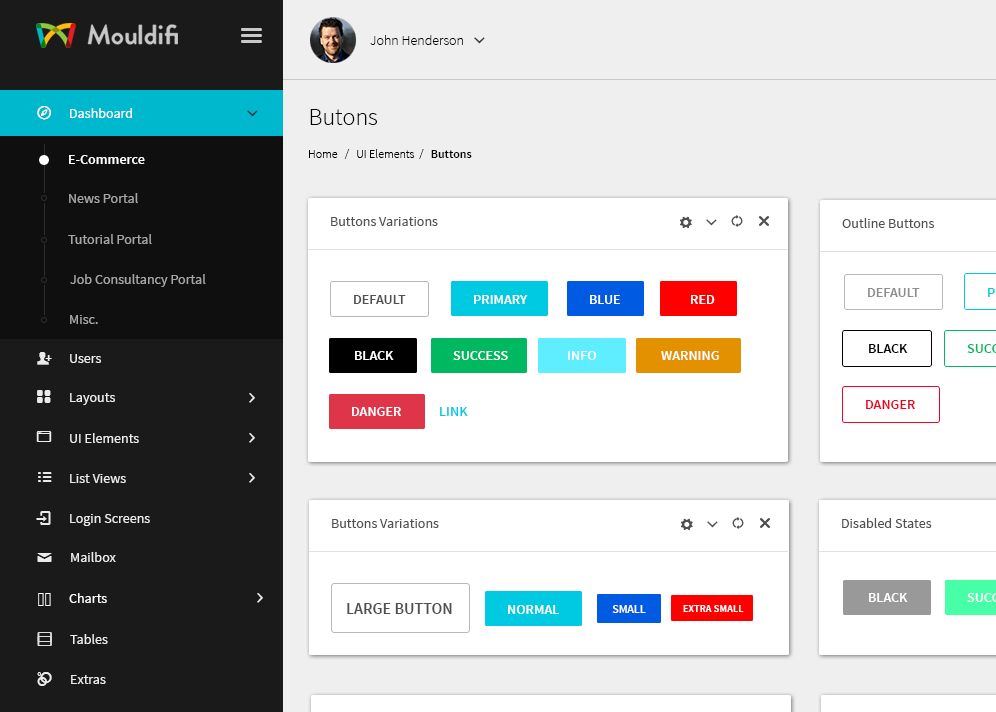
<style>
.page{position:relative;width:996px;height:712px;background:#ffffff}
.page>*{position:absolute;margin:0}
.t1{font:14px "SourceSansPro-Light";color:#000000}
.t2{font:14px "SourceSansPro-Regular";color:#ffffff}
.t3{font:14px "SourceSansPro-Regular";color:#ffffff;font-variant:small-caps}
.t4{font:24px "SourceSansPro-Light";color:#000000}
.t5{font:12px "SourceSansPro-Light";color:#000000}
.t6{font:12px "SourceSansPro-Semibold";color:#000000}
.t7{font:14px "SourceSansPro-Semibold";color:#ffffff}
.t8{font:14px "SourceSansPro-Regular";color:#a6a5a5}
.t9{font:14px "SourceSansPro-Regular";color:#505050}
.t10{font:13.7px "SourceSansPro-Regular";color:#a6a5a5}
.t11{font:14px "SourceSansPro-Semibold";color:#8e8e8e;text-transform:uppercase}
.t12{font:14px "SourceSansPro-Semibold";color:#505050;text-transform:uppercase}
.t13{font:14px "SourceSansPro-Semibold";color:#ffffff;text-transform:uppercase}
.t14{font:14px "SourceSansPro-Semibold";color:#000000;text-transform:uppercase}
.t15{font:14px "SourceSansPro-Regular";color:#ebebeb}
.t16{font:14px "SourceSansPro-Semibold";color:#ed041f;text-transform:uppercase}
.t17{font:14px "SourceSansPro-Semibold";color:#00cae2;text-transform:uppercase}
.t18{font:16px "SourceSansPro-Semibold";color:#505050;text-transform:uppercase}
.t19{font:11.6px "SourceSansPro-Semibold";color:#ffffff;text-transform:uppercase}
.t20{font:10.4px "SourceSansPro-Semibold";color:#ffffff;text-transform:uppercase}
.t21{font:13.7px "SourceSansPro-Regular";color:#ebebeb}
</style>
<div class="page">
<p class="t1" style="left:370px;top:35px;width:93px;height:10px">John Henderson</p>
<p class="t2" style="left:70px;top:108px;width:62px;height:10px"><span class="t3">D</span>ashboard</p>
<p class="t4" style="left:310px;top:109px;width:67px;height:16px">Butons</p>
<p class="t5" style="left:309px;top:149px;width:163px;height:10px">Home   /   UI Elements  /  <span class="t6"> Buttons</span></p>
<p class="t7" style="left:69px;top:155px;width:76px;height:9px">E-Commerce</p>
<p class="t8" style="left:69px;top:193px;width:69px;height:10px">News Portal</p>
<p class="t9" style="left:331px;top:217px;width:107px;height:9px">Buttons Variations</p>
<p class="t9" style="left:842px;top:218px;width:92px;height:10px">Outline Buttons</p>
<p class="t10" style="left:68px;top:234px;width:84px;height:10px">Tutorial Portal</p>
<p class="t10" style="left:70px;top:274px;width:136px;height:13px">Job Consultancy Portal</p>
<p class="t11" style="left:868px;top:288px;width:52px;height:9px">default</p>
<p class="t12" style="left:354px;top:295px;width:52px;height:9px">default</p>
<p class="t13" style="left:474px;top:295px;width:54px;height:9px">primary</p>
<p class="t13" style="left:590px;top:295px;width:30px;height:9px">blue</p>
<p class="t13" style="left:691px;top:295px;width:24px;height:9px">red</p>
<p class="t10" style="left:70px;top:315px;width:28px;height:9px">Misc.</p>
<p class="t13" style="left:355px;top:351px;width:39px;height:9px">black</p>
<p class="t13" style="left:453px;top:351px;width:55px;height:9px">SUCCESS</p>
<p class="t13" style="left:568px;top:351px;width:29px;height:9px">INFO</p>
<p class="t13" style="left:661px;top:351px;width:58px;height:9px">WARNING</p>
<p class="t14" style="left:869px;top:344px;width:39px;height:9px">black</p>
<p class="t15" style="left:70px;top:354px;width:31px;height:9px">Users</p>
<p class="t15" style="left:70px;top:393px;width:45px;height:12px">Layouts</p>
<p class="t16" style="left:866px;top:400px;width:49px;height:9px">DANGER</p>
<p class="t13" style="left:352px;top:407px;width:49px;height:9px">DANGER</p>
<p class="t17" style="left:440px;top:407px;width:28px;height:9px">LINK</p>
<p class="t15" style="left:70px;top:433px;width:69px;height:10px">UI Elements</p>
<p class="t15" style="left:70px;top:474px;width:56px;height:9px">List Views</p>
<p class="t15" style="left:70px;top:514px;width:80px;height:12px">Login Screens</p>
<p class="t9" style="left:332px;top:519px;width:107px;height:9px">Buttons Variations</p>
<p class="t9" style="left:842px;top:518px;width:90px;height:10px">Disabled States</p>
<p class="t15" style="left:71px;top:552px;width:45px;height:10px">Mailbox</p>
<p class="t2" style="left:69px;top:593px;width:38px;height:10px">Charts</p>
<p class="t13" style="left:869px;top:593px;width:39px;height:9px">black</p>
<p class="t18" style="left:347px;top:603px;width:105px;height:11px">large button</p>
<p class="t13" style="left:508px;top:605px;width:51px;height:9px">normal</p>
<p class="t19" style="left:612px;top:605px;width:34px;height:8px">small</p>
<p class="t20" style="left:683px;top:605px;width:61px;height:7px">extra small</p>
<p class="t21" style="left:70px;top:634px;width:38px;height:10px">Tables</p>
<p class="t21" style="left:71px;top:675px;width:35px;height:9px">Extras</p>
</div>
